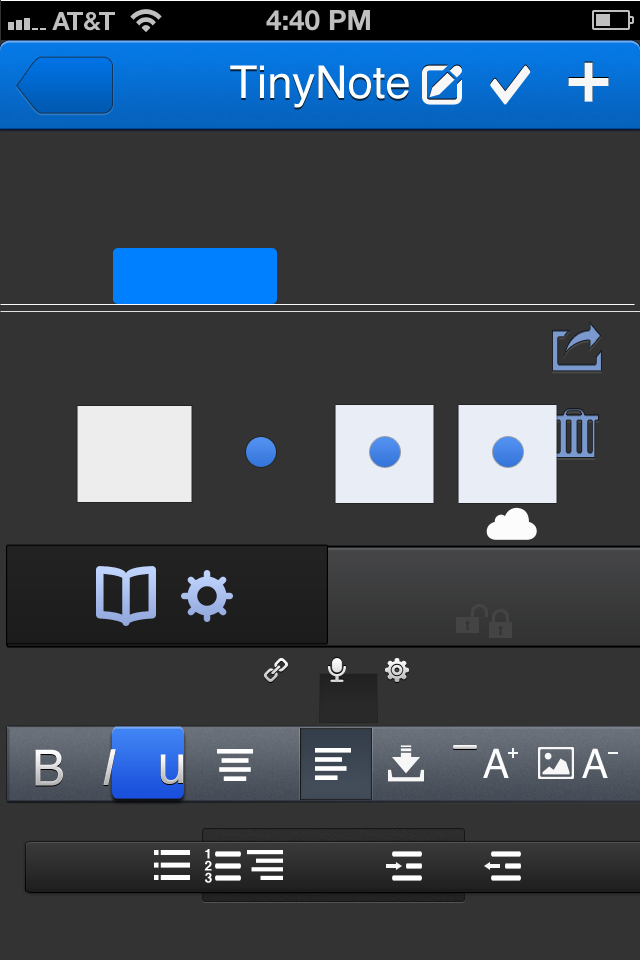
<style>
.page{position:relative;width:640px;height:960px;background:#333333}
.page>*{position:absolute;margin:0}
.t1{font:45.3px "Helvetica";color:#feffff}
.t2{font:49.8px "Helvetica"}
.t3{font:49.8px "Helvetica-Oblique"}
.t4{font:40.8px "Helvetica";color:#fdfdff}
.t5{font:54.3px "Helvetica"}
.t6{font:13.6px "Helvetica-Bold";color:#ffffff}
</style>
<div class="page">
<p class="t1" style="left:230px;top:65px;width:179px;height:43px">TinyNote</p>
<p class="t2" style="left:35px;top:749px;width:28px;height:37px">B</p>
<p class="t3" style="left:103px;top:749px;width:13px;height:36px">I</p>
<p class="t4" style="left:483px;top:748px;width:26px;height:30px">A</p>
<p class="t4" style="left:582px;top:748px;width:26px;height:30px">A</p>
<p class="t5" style="left:160px;top:754px;width:23px;height:30px">u</p>
<p class="t6" style="left:205px;top:849px;width:5px;height:10px">1</p>
<p class="t6" style="left:204px;top:860px;width:8px;height:11px">2</p>
<p class="t6" style="left:205px;top:872px;width:7px;height:11px">3</p>
</div>
